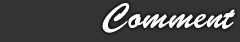
<style>
.page{position:relative;width:240px;height:42px;background:#333333}
.page>*{position:absolute;margin:0}
.t1{font:36px "BrushScriptStd";color:#ffffff}
</style>
<div class="page">
<p class="t1" style="left:102px;top:3px;width:134px;height:30px">Comment</p>
</div>
